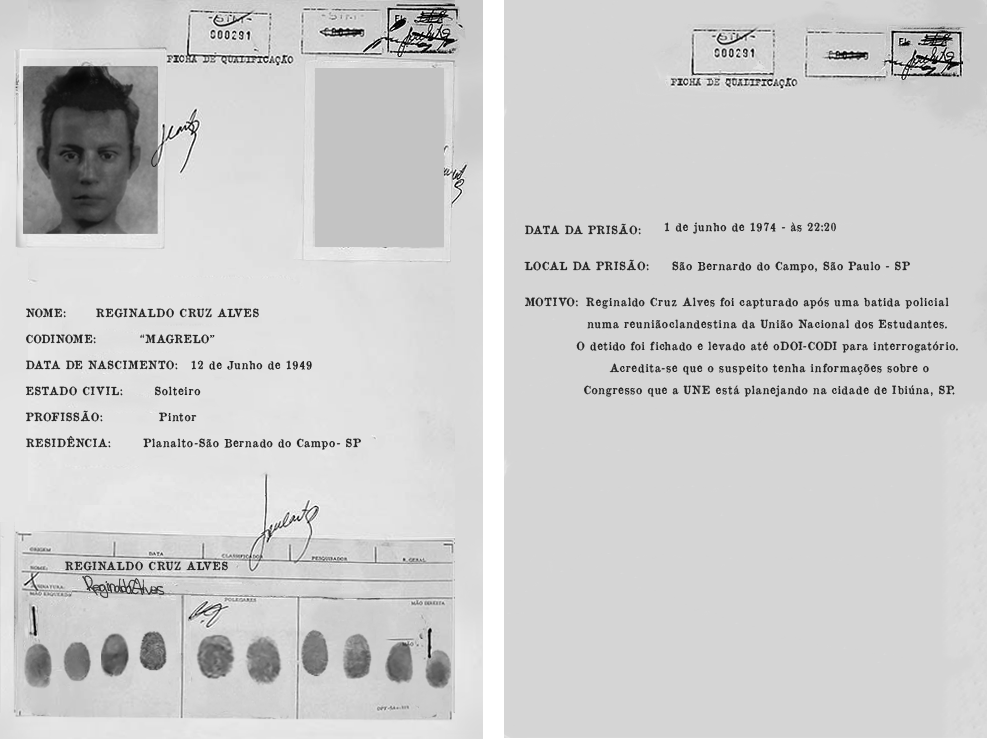
<style>
.page{position:relative;width:993px;height:739px;background:#d5d5d5}
.page>*{position:absolute;margin:0}
.t1{font:11px/39px "OldNewspaperTypes";letter-spacing:0.06em;color:#222222}
.t2{font:11px/35px "OldNewspaperTypes";letter-spacing:0.06em;color:#222222}
.t3{font:11px/36px "OldNewspaperTypes";letter-spacing:0.06em;color:#222222}
.t4{font:11px/26px "OldNewspaperTypes";letter-spacing:0.06em;color:#222222}
.t5{font:11px/22px "OldNewspaperTypes";letter-spacing:0.06em;color:#222222}
.t6{font:11px "OldNewspaperTypes";letter-spacing:0.06em;color:#222222}
</style>
<div class="page">
<p class="t1" style="left:664px;top:222px;width:246px;height:51px;text-align:center"><span class="t2">                          </span>1 de junho de 1974 - às 22:20<br>                                            São Bernardo do Campo, São Paulo - SP</p>
<p class="t3" style="left:524px;top:223px;width:125px;height:84px"><span class="t4">DATA DA PRISÃO:  <br></span>LOCAL DA PRISÃO:<br>MOTIVO:</p>
<p class="t5" style="left:576px;top:297px;width:382px;height:100px;text-align:center">Reginaldo Cruz Alves foi capturado após uma batida policial <br>numa reuniãoclandestina da União Nacional dos Estudantes. <br>O detido foi fichado e levado até oDOI-CODI para interrogatório. <br>Acredita-se que o suspeito tenha informações sobre o<br>Congresso que a UNE está planejando na cidade de Ibiúna, SP.</p>
<p class="t4" style="left:25px;top:308px;width:153px;height:140px">NOME:<br>CODINOME:<br>DATA DE NASCIMENTO:<br>ESTADO CIVIL:<br>PROFISSÃO:<br>RESIDÊNCIA:</p>
<p class="t4" style="left:96px;top:308px;width:265px;height:142px;text-align:center">REGINALDO CRUZ ALVES<br>“MAGRELO”<br>   12 de Junho de 1949<br>Solteiro<br>Pintor<br>                                 Planalto-São Bernado do Campo- SP</p>
<p class="t6" style="left:65px;top:561px;width:163px;height:10px">REGINALDO CRUZ ALVES</p>
</div>
